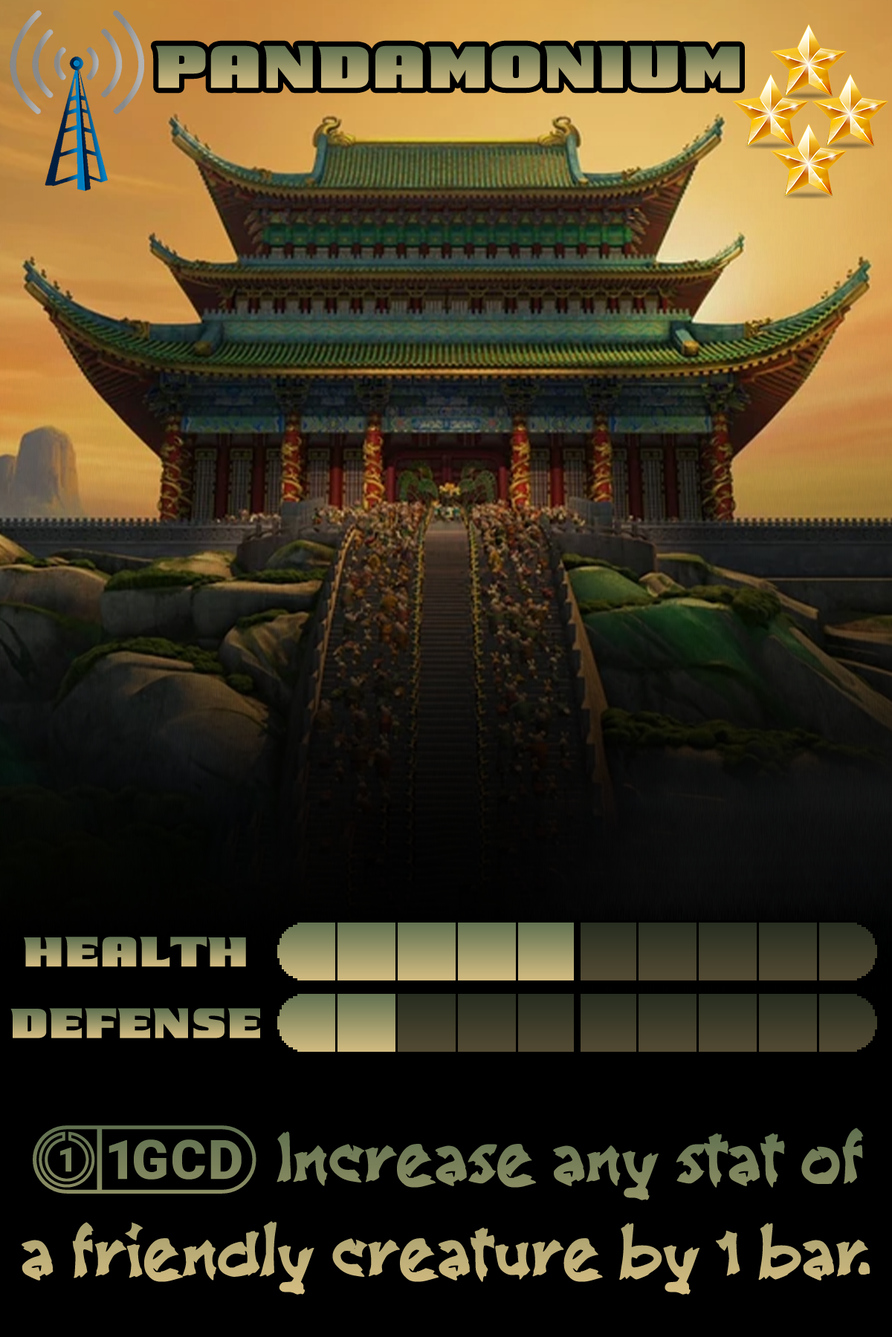
<style>
.page{position:relative;width:892px;height:1337px;background:#000000}
.page>*{position:absolute;margin:0}
.t1{font:104.8px "Kung-Fu-Panda"}
.t2{font:74.3px "Kung-Fu-Panda"}
.t3{font:122.6px "bBambooGrove"}
.t4{font:122.6px "stoogedings-Regular"}
</style>
<div class="page">
<p class="t1" style="left:155px;top:45px;width:584px;height:43px">Pandamonium</p>
<p class="t2" style="left:24px;top:937px;width:222px;height:30px">Health</p>
<p class="t2" style="left:10px;top:1008px;width:250px;height:31px">Defense</p>
<p class="t3" style="left:22px;top:1126px;width:848px;height:169px"><span class="t4">(1GCD)</span> Increase any stat of a friendly creature by 1 bar.</p>
</div>
